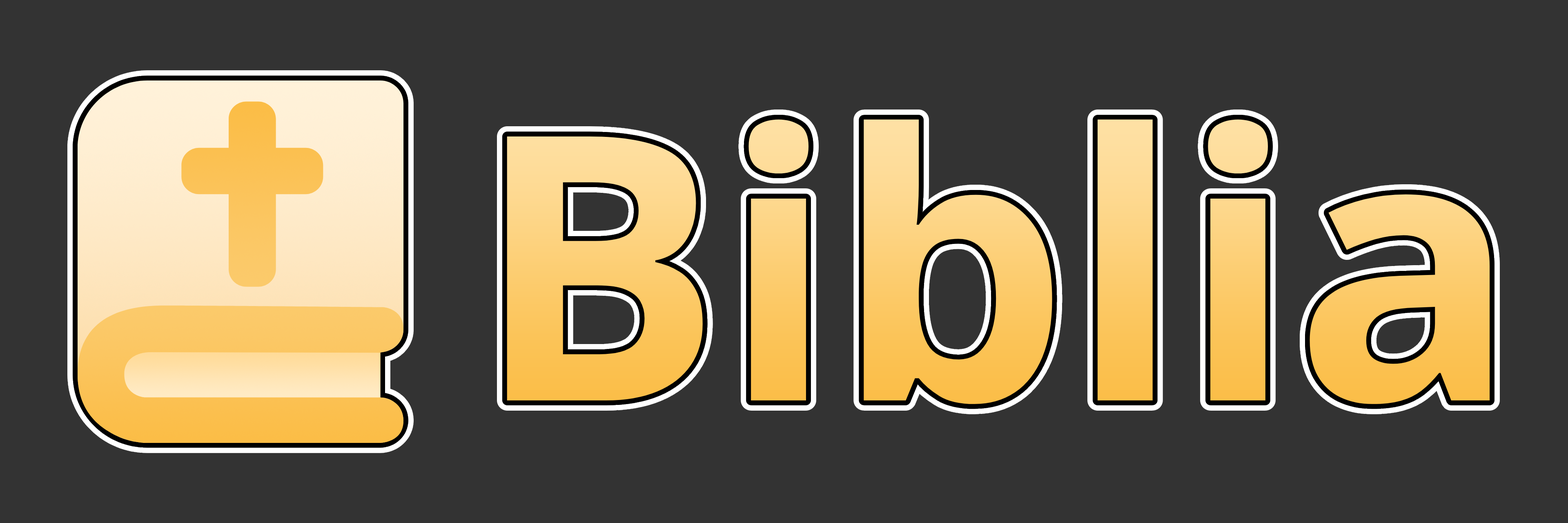
<style>
.page{position:relative;width:1568px;height:523px;background:#333333}
.page>*{position:absolute;margin:0}
.t1{font:369.5px "OpenSans-Bold"}
</style>
<div class="page">
<p class="t1" style="left:507px;top:119px;width:983px;height:285px">Biblia</p>
</div>
